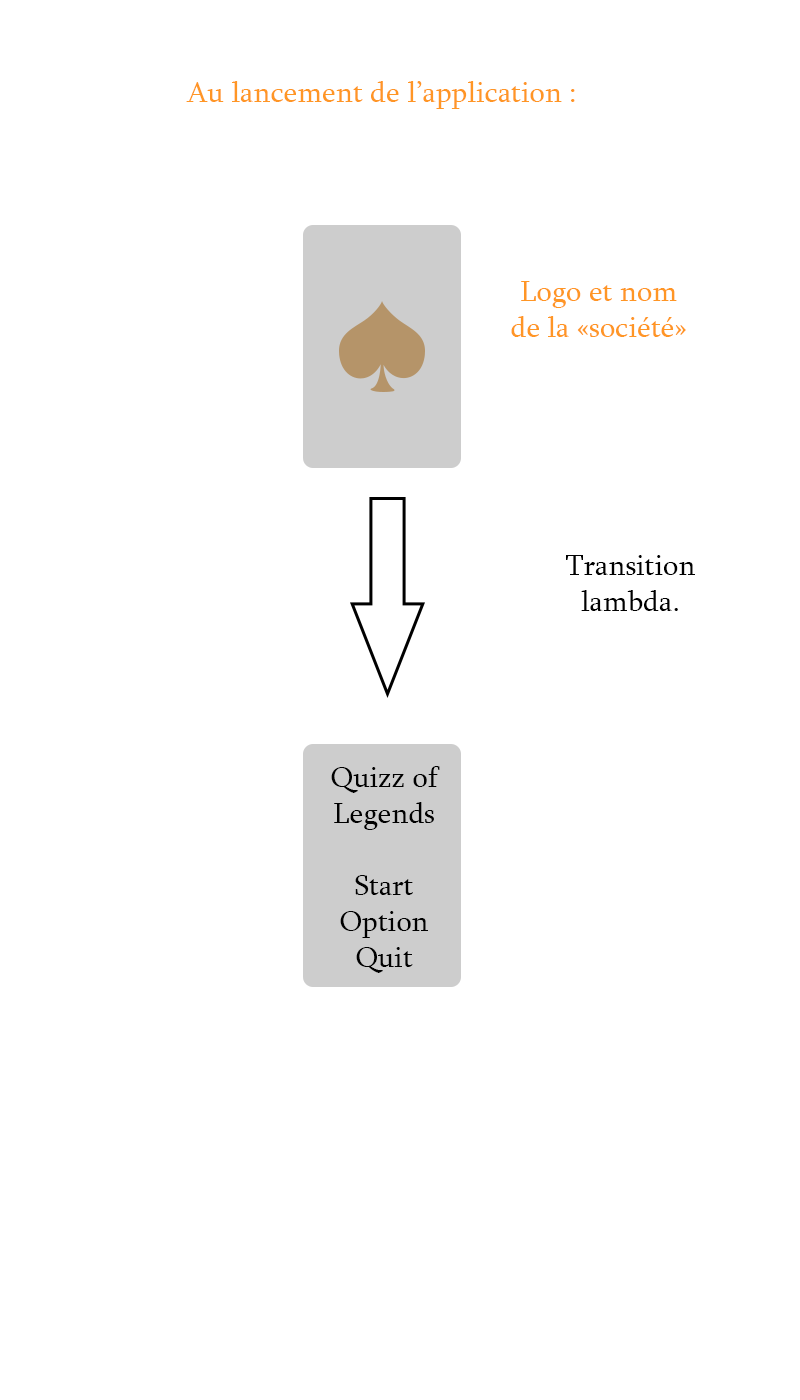
<style>
.page{position:relative;width:800px;height:1400px;background:#ffffff}
.page>*{position:absolute;margin:0}
.t1{font:30px "Sylfaen";color:#ff9625}
.t2{font:30px "Sylfaen";color:#000000}
</style>
<div class="page">
<p class="t1" style="left:186px;top:81px;width:389px;height:28px">Au lancement de l’application :</p>
<p class="t1" style="left:511px;top:281px;width:175px;height:56px;text-align:center">Logo et nom de la «société»</p>
<p class="t2" style="left:566px;top:555px;width:129px;height:56px;text-align:center">Transition lambda.</p>
<p class="t2" style="left:331px;top:766px;width:109px;height:207px;text-align:center">Quizz of Legends<br><br>Start<br>Option<br>Quit</p>
</div>
